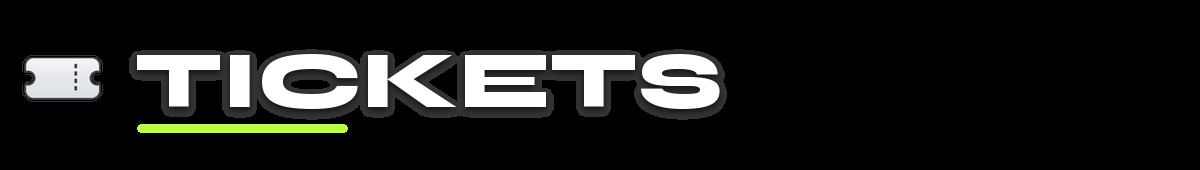
<style>
.page{position:relative;width:1200px;height:170px;background:#000000}
.page>*{position:absolute;margin:0}
.t1{font:80px "Syne-ExtraBold";color:#ffffff}
</style>
<div class="page">
<p class="t1" style="left:137px;top:54px;width:583px;height:55px">TICKETS</p>
</div>
